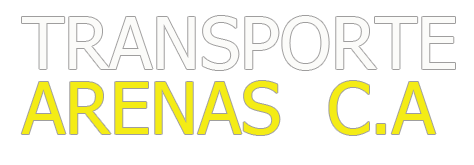
<style>
.page{position:relative;width:474px;height:165px;background:#ffffff}
.page>*{position:absolute;margin:0}
.t1{font:72px/65px "Tahoma";color:#f4ec15}
.t2{font:72px/65px "Tahoma";color:#fbfbf9}
</style>
<div class="page">
<p class="t1" style="left:21px;top:16px;width:434px;height:119px"><span class="t2">TRANSPORTE <br></span>ARENAS  C.A</p>
</div>
